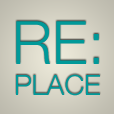
<style>
.page{position:relative;width:114px;height:114px}
.page>*{position:absolute;margin:0}
.t1{font:60px "HelveticaNeue-Light";color:#009999;text-transform:uppercase}
.t2{font:28px "HelveticaNeue-Light";color:#009999;text-transform:uppercase}
</style>
<div class="page">
<p class="t1" style="left:16px;top:21px;width:83px;height:43px">RE:</p>
<p class="t2" style="left:16px;top:74px;width:84px;height:22px">place</p>
</div>
